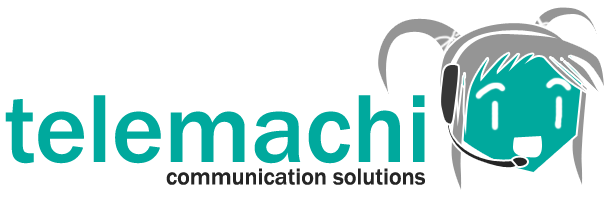
<style>
.page{position:relative;width:610px;height:200px;background:#ffffff}
.page>*{position:absolute;margin:0}
.t1{font:100px "FranklinGothic-Medium";color:#00a99d}
.t2{font:24px "FranklinGothic-Medium";color:#252525}
</style>
<div class="page">
<p class="t1" style="left:5px;top:95px;width:420px;height:69px">telemachi</p>
<p class="t2" style="left:166px;top:168px;width:259px;height:17px">communication solutions</p>
</div>
